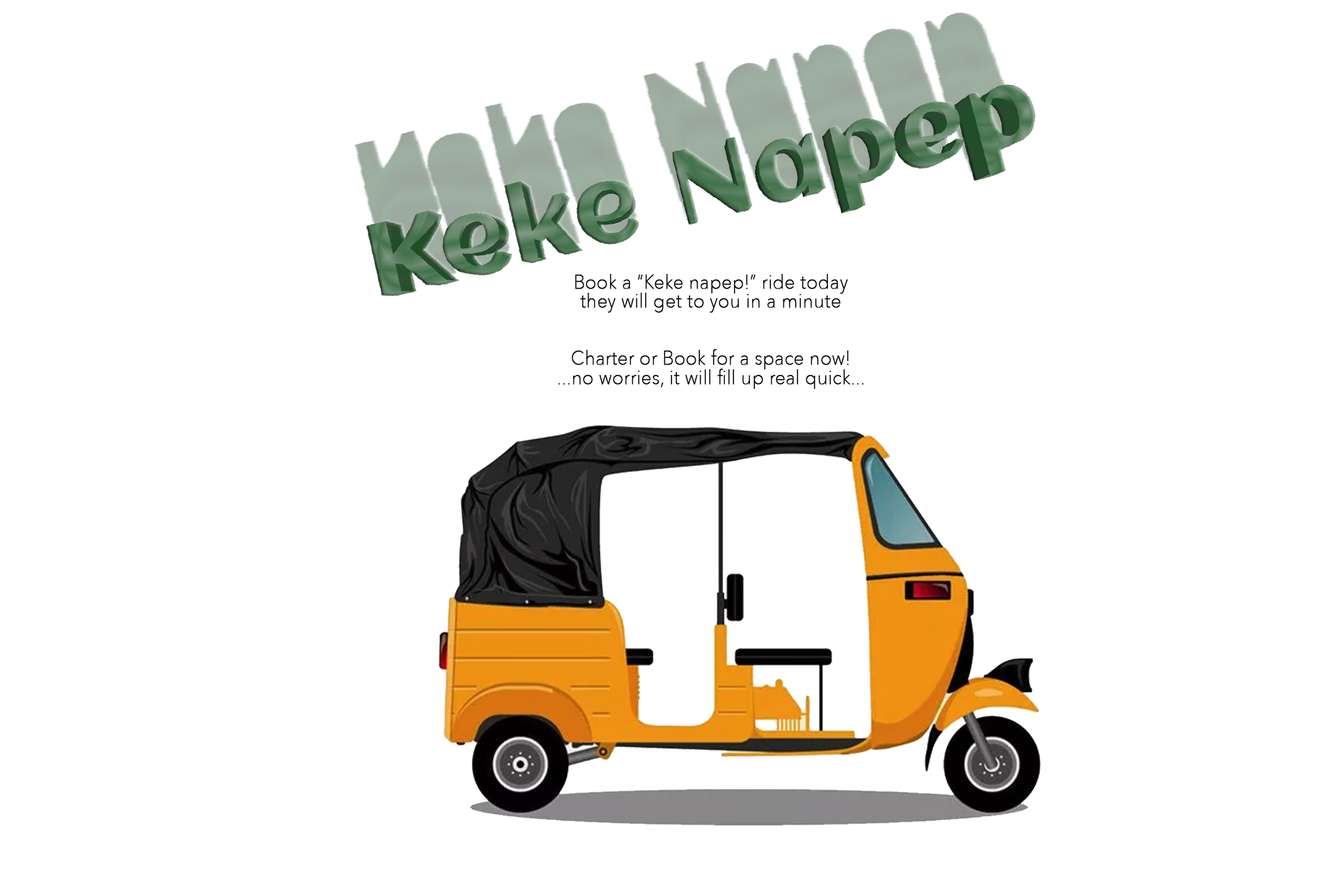
<style>
.page{position:relative;width:1337px;height:892px;background:#ffffff}
.page>*{position:absolute;margin:0}
.t1{font:19.2px/19.1px "AvenirNext-UltraLight";color:#000000;font-weight:bold;scale:0.95 1}
</style>
<div class="page">
<p class="t1" style="left:559px;top:274px;width:305px;height:115px;text-align:center">Book a “Keke napep!” ride today<br>they will get to you in a minute<br><br><br>Charter or Book for a space now!<br>...no worries, it will fill up real quick...</p>
</div>
